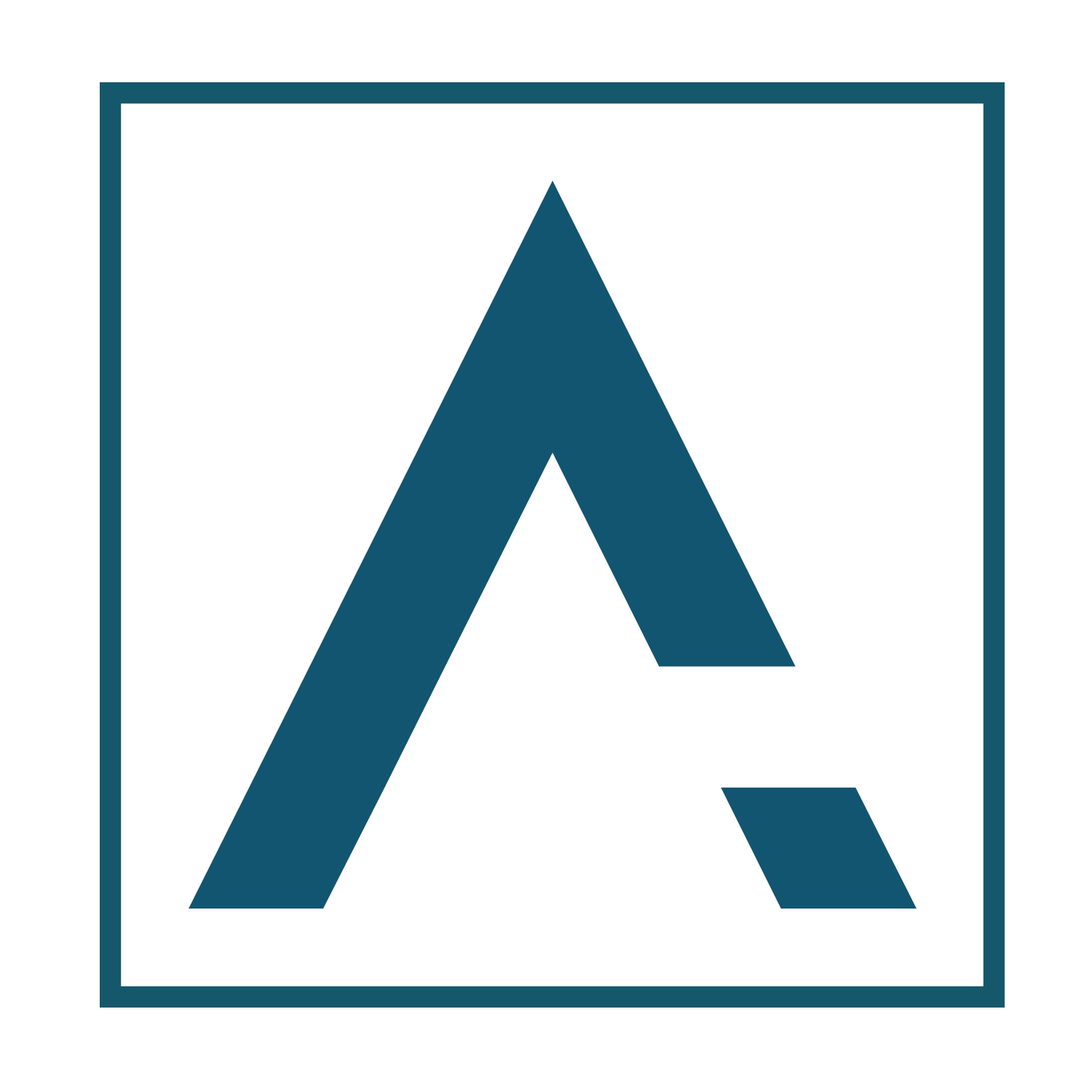
<style>
.page{position:relative;width:1092px;height:1092px;background:#ffffff}
.page>*{position:absolute;margin:0}
.t1{font:910px "Anurati-Regular";letter-spacing:0.1em;color:#125571}
</style>
<div class="page">
<p class="t1" style="left:189px;top:181px;width:728px;height:728px">A</p>
</div>
